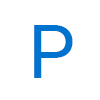
<style>
.page{position:relative;width:100px;height:100px;background:#ffffff}
.page>*{position:absolute;margin:0}
.t1{font:75px "Roboto-Regular";color:#0073cf}
</style>
<div class="page">
<p class="t1" style="left:34px;top:25px;width:39px;height:53px">P</p>
</div>
